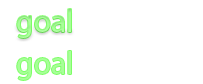
<style>
.page{position:relative;width:203px;height:84px;background:#ffffff}
.page>*{position:absolute;margin:0}
.t1{font:31.5px "MyriadPro-Regular";color:#a7ff98}
</style>
<div class="page">
<p class="t1" style="left:17px;top:9px;width:54px;height:29px">goal</p>
</div>
